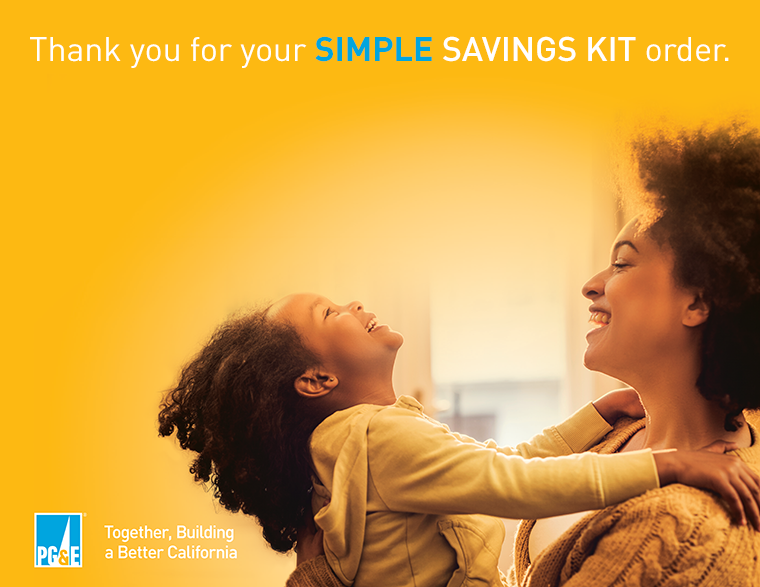
<style>
.page{position:relative;width:760px;height:587px;background:#fdb912}
.page>*{position:absolute;margin:0}
.t1{font:33.9px "DINOT-Regular";letter-spacing:-0.005em;color:#ffffff}
.t2{font:33.9px "DINOT-Bold";letter-spacing:-0.005em;color:#00a5df}
.t3{font:33.9px "DINOT-Medium";letter-spacing:-0.005em;color:#ffffff}
</style>
<div class="page">
<p class="t1" style="left:30px;top:36px;width:699px;height:32px">Thank you for your <span class="t2">SIMPLE </span><span class="t3">SAVINGS KIT</span> order.</p>
</div>
